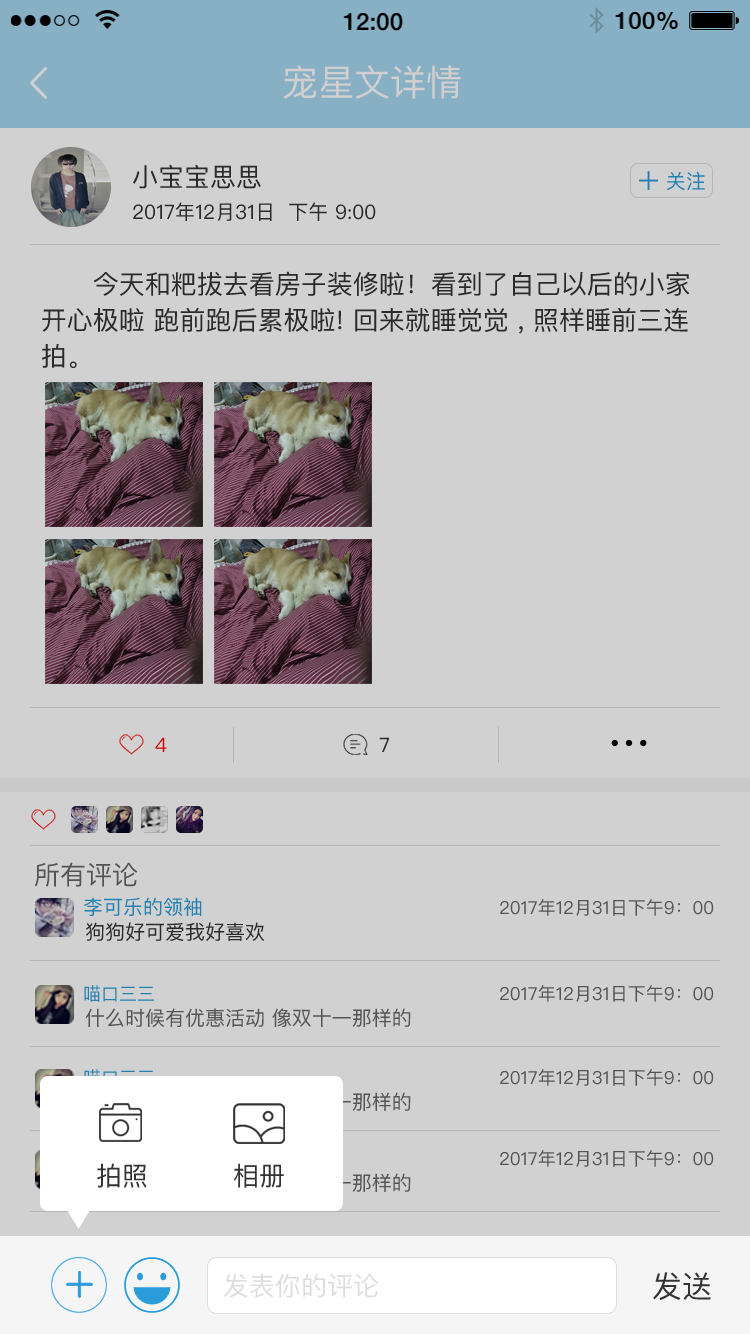
<style>
.page{position:relative;width:750px;height:1334px;background:#d1d1d1}
.page>*{position:absolute;margin:0}
.t1{font:36px "PingFangSC-Regular";color:#d1cfcf}
.t2{font:26px "PingFangSC";color:#333333}
.t3{font:20px "PingFangSC";color:#2280b3}
.t4{font:20px "PingFangSC";color:#333333}
.t5{font:26px/36px "PingFangSC";color:#333333}
.t6{font:20px "PingFangSC";color:#d10000}
.t7{font:26px "PingFangSC";color:#666666}
.t8{font:18px "PingFangSC";color:#666666}
.t9{font:18px "PingFangSC";color:#2280b3}
.t10{font:20px "PingFangSC";color:#666666}
.t11{font:26px "PingFangSC";color:#dddddd}
.t12{font:30px "PingFangSC";color:#333333}
</style>
<div class="page">
<p class="t1" style="left:283px;top:65px;width:178px;height:34px">宠星文详情</p>
<p class="t2" style="left:133px;top:164px;width:128px;height:25px">小宝宝思思</p>
<p class="t3" style="left:666px;top:171px;width:39px;height:20px">关注</p>
<p class="t4" style="left:133px;top:202px;width:243px;height:19px">2017年12月31日  下午 9:00</p>
<p class="t5" style="left:42px;top:271px;width:648px;height:97px">今天和粑拔去看房子装修啦！看到了自己以后的小家开心极啦 跑前跑后累极啦! 回来就睡觉觉 , 照样睡前三连拍。</p>
<p class="t6" style="left:155px;top:737px;width:12px;height:15px">4</p>
<p class="t4" style="left:379px;top:737px;width:10px;height:15px">7</p>
<p class="t7" style="left:35px;top:862px;width:103px;height:25px">所有评论</p>
<p class="t3" style="left:84px;top:897px;width:118px;height:19px">李可乐的领袖</p>
<p class="t8" style="left:500px;top:899px;width:214px;height:17px">2017年12月31日下午9：00</p>
<p class="t4" style="left:86px;top:922px;width:179px;height:19px">狗狗好可爱我好喜欢</p>
<p class="t9" style="left:84px;top:985px;width:70px;height:17px">喵口三三</p>
<p class="t8" style="left:500px;top:985px;width:214px;height:17px">2017年12月31日下午9：00</p>
<p class="t10" style="left:85px;top:1008px;width:326px;height:19px">什么时候有优惠活动 像双十一那样的</p>
<p class="t8" style="left:500px;top:1069px;width:214px;height:17px">2017年12月31日下午9：00</p>
<p class="t8" style="left:500px;top:1150px;width:214px;height:17px">2017年12月31日下午9：00</p>
<p class="t2" style="left:97px;top:1163px;width:50px;height:25px">拍照</p>
<p class="t2" style="left:234px;top:1163px;width:50px;height:25px">相册</p>
<p class="t11" style="left:224px;top:1273px;width:155px;height:25px">发表你的评论</p>
<p class="t12" style="left:653px;top:1272px;width:58px;height:28px">发送</p>
</div>
